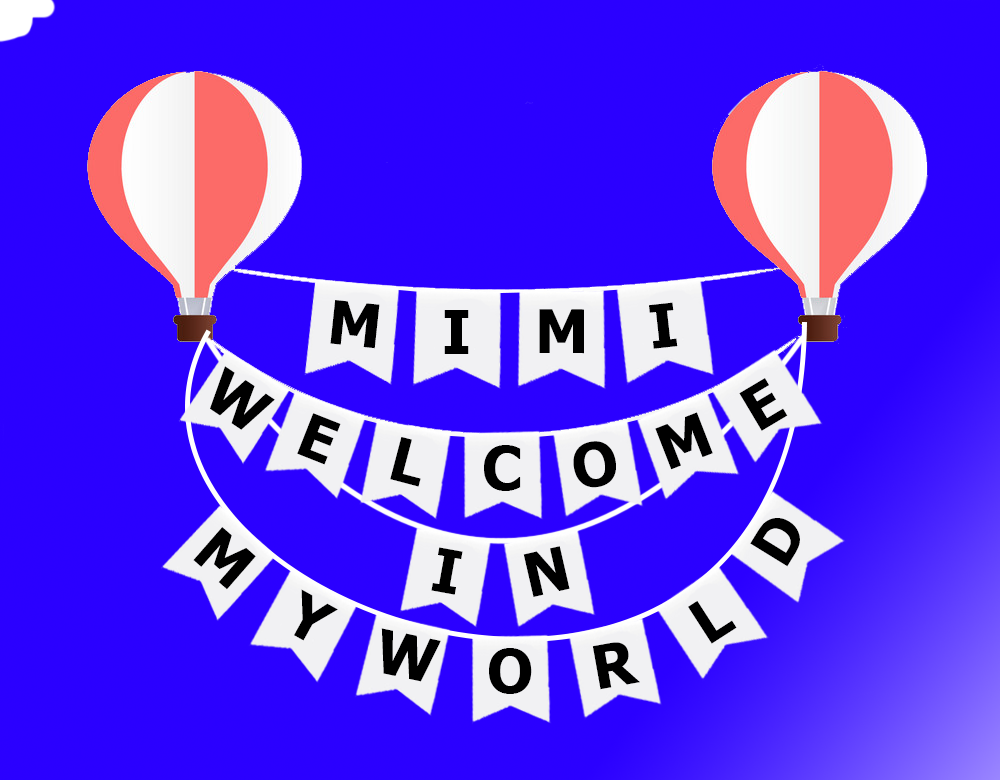
<style>
.page{position:relative;width:1000px;height:780px;background:#2b00ff}
.page>*{position:absolute;margin:0}
.t1{font:60px "Tahoma-Bold";letter-spacing:0.4em;color:#000000}
</style>
<div class="page">
<p class="t1" style="left:330px;top:300px;width:50px;height:49px;rotate:6deg">M</p>
<p class="t1" style="left:649px;top:302px;width:29px;height:47px;rotate:-6deg">I</p>
<p class="t1" style="left:444px;top:310px;width:25px;height:44px">I</p>
<p class="t1" style="left:539px;top:309px;width:45px;height:45px">M</p>
<p class="t1" style="left:210px;top:366px;width:65px;height:64px;rotate:34deg">W</p>
<p class="t1" style="left:739px;top:378px;width:49px;height:53px;rotate:-31deg">E</p>
<p class="t1" style="left:297px;top:413px;width:44px;height:52px;rotate:22deg">E</p>
<p class="t1" style="left:655px;top:412px;width:58px;height:58px;rotate:-21deg">M</p>
<p class="t1" style="left:390px;top:437px;width:31px;height:50px;rotate:15deg">L</p>
<p class="t1" style="left:484px;top:445px;width:37px;height:46px">C</p>
<p class="t1" style="left:573px;top:441px;width:43px;height:47px;rotate:-10deg">O</p>
<p class="t1" style="left:750px;top:518px;width:50px;height:49px;rotate:-58deg">D</p>
<p class="t1" style="left:193px;top:527px;width:63px;height:63px;rotate:41deg">M</p>
<p class="t1" style="left:431px;top:547px;width:32px;height:48px;rotate:10deg">I</p>
<p class="t1" style="left:523px;top:546px;width:47px;height:51px;rotate:-13deg">N</p>
<p class="t1" style="left:294px;top:589px;width:44px;height:52px;rotate:29deg">Y</p>
<p class="t1" style="left:688px;top:601px;width:49px;height:43px;rotate:-33deg">L</p>
<p class="t1" style="left:381px;top:628px;width:60px;height:54px;rotate:12deg">W</p>
<p class="t1" style="left:489px;top:648px;width:43px;height:46px">O</p>
<p class="t1" style="left:592px;top:642px;width:48px;height:48px;rotate:-10deg">R</p>
</div>
